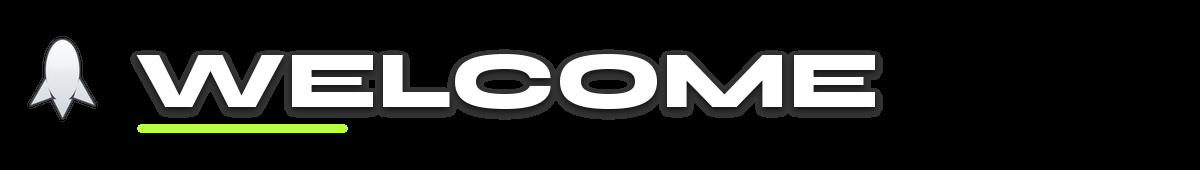
<style>
.page{position:relative;width:1200px;height:170px;background:#000000}
.page>*{position:absolute;margin:0}
.t1{font:80px "Syne-ExtraBold";color:#ffffff}
</style>
<div class="page">
<p class="t1" style="left:136px;top:54px;width:739px;height:55px">WELCOME</p>
</div>
